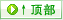
<style>
.page{position:relative;width:63px;height:20px;background:#ffffff}
.page>*{position:absolute;margin:0}
.t1{font:12px "SimHei";letter-spacing:0.05em;color:#039a01;font-weight:bold}
</style>
<div class="page">
<p class="t1" style="left:22px;top:4px;width:33px;height:12px">↑顶部</p>
</div>
